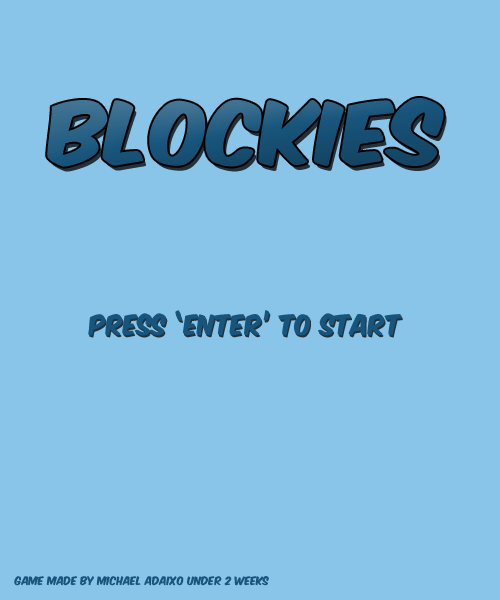
<style>
.page{position:relative;width:500px;height:600px;background:#89c4e9}
.page>*{position:absolute;margin:0}
.t1{font:73.7px "KomikaAxis";color:#18557c;scale:1.13 1}
.t2{font:24px "KomikaAxis";color:#18557c}
.t3{font:10px "KomikaAxis";color:#18557c}
</style>
<div class="page">
<p class="t1" style="left:47px;top:98px;width:397px;height:69px">Blockies</p>
<p class="t2" style="left:88px;top:310px;width:314px;height:26px">Press ‘enter’ to start</p>
<p class="t3" style="left:14px;top:576px;width:255px;height:10px">Game made by Michael adaixo under 2 weeks</p>
</div>
